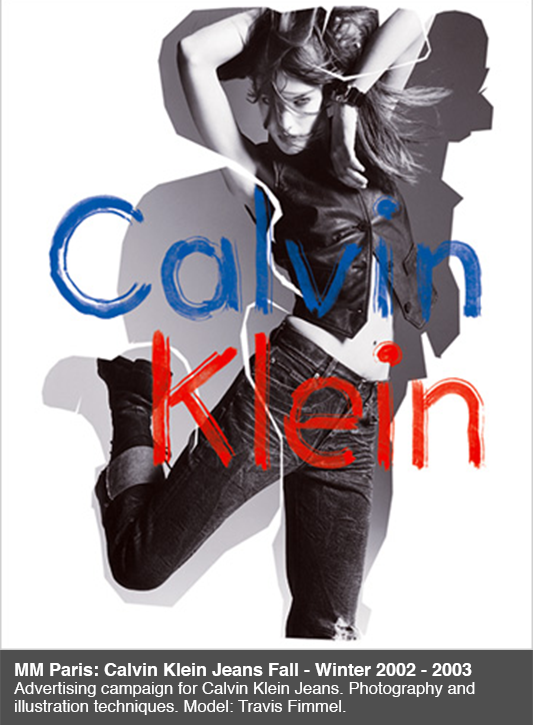
<style>
.page{position:relative;width:533px;height:725px;background:#ffffff}
.page>*{position:absolute;margin:0}
.t1{font:16.7px/18px "Helvetica";color:#ffffff}
.t2{font:18px/18px "Helvetica-Bold";color:#ffffff}
</style>
<div class="page">
<p class="t1" style="left:14px;top:663px;width:461px;height:52px"><span class="t2">MM Paris: Calvin Klein Jeans Fall - Winter 2002 - 2003<br></span>Advertising campaign for Calvin Klein Jeans. Photography and<br>illustration techniques. Model: Travis Fimmel.</p>
</div>
